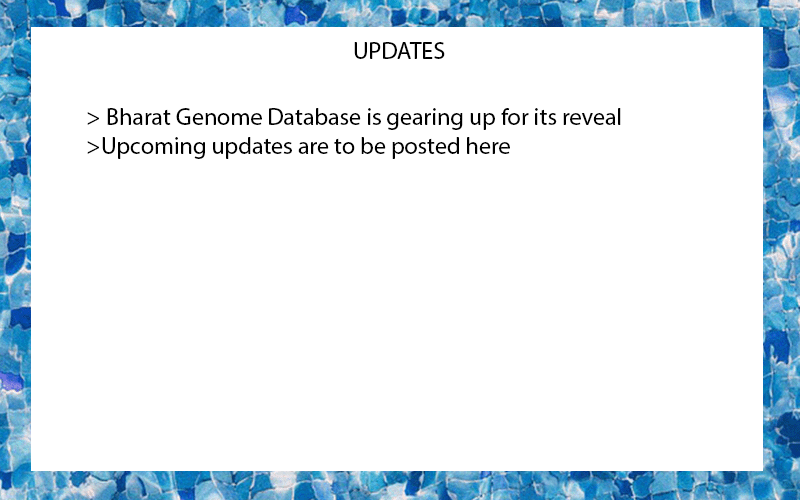
<style>
.page{position:relative;width:800px;height:500px;background:#ffffff}
.page>*{position:absolute;margin:0}
.t1{font:24px "MyriadPro-Regular";color:#000000}
</style>
<div class="page">
<p class="t1" style="left:354px;top:42px;width:91px;height:17px">UPDATES</p>
<p class="t1" style="left:87px;top:108px;width:534px;height:51px">&gt; Bharat Genome Database is gearing up for its reveal<br>&gt;Upcoming updates are to be posted here</p>
</div>
